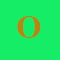
<style>
.page{position:relative;width:60px;height:60px;background:#15ed67}
.page>*{position:absolute;margin:0}
.t1{font:33.3px "TimesNewRomanPS-BoldMT";color:#af8916}
</style>
<div class="page">
<p class="t1" style="left:17px;top:16px;width:24px;height:22px">O</p>
</div>
